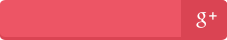
<style>
.page{position:relative;width:227px;height:40px;background:#ed5565}
.page>*{position:absolute;margin:0}
.t1{font:14.8px "ArialMT";color:#ffffff}
</style>
<div class="page">
<p class="t1" style="left:209px;top:12px;width:8px;height:8px">+</p>
</div>
